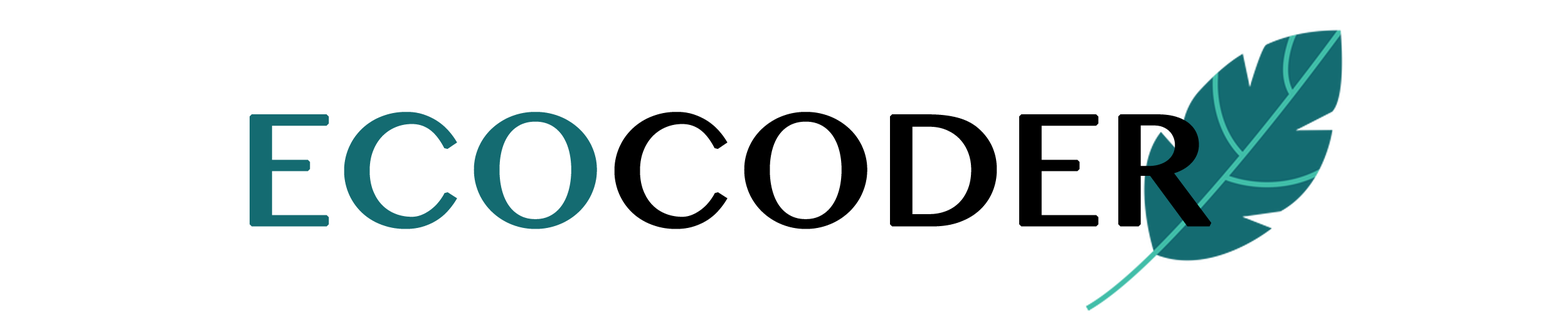
<style>
.page{position:relative;width:1568px;height:314px;background:#ffffff}
.page>*{position:absolute;margin:0}
.t1{font:158.2px "LaoMN";color:#000000;text-transform:uppercase;font-weight:bold}
.t2{font:158.2px "LaoMN";color:#146b71;text-transform:uppercase;font-weight:bold}
</style>
<div class="page">
<p class="t1" style="left:250px;top:112px;width:962px;height:117px"><span class="t2">eco</span>coder</p>
</div>
